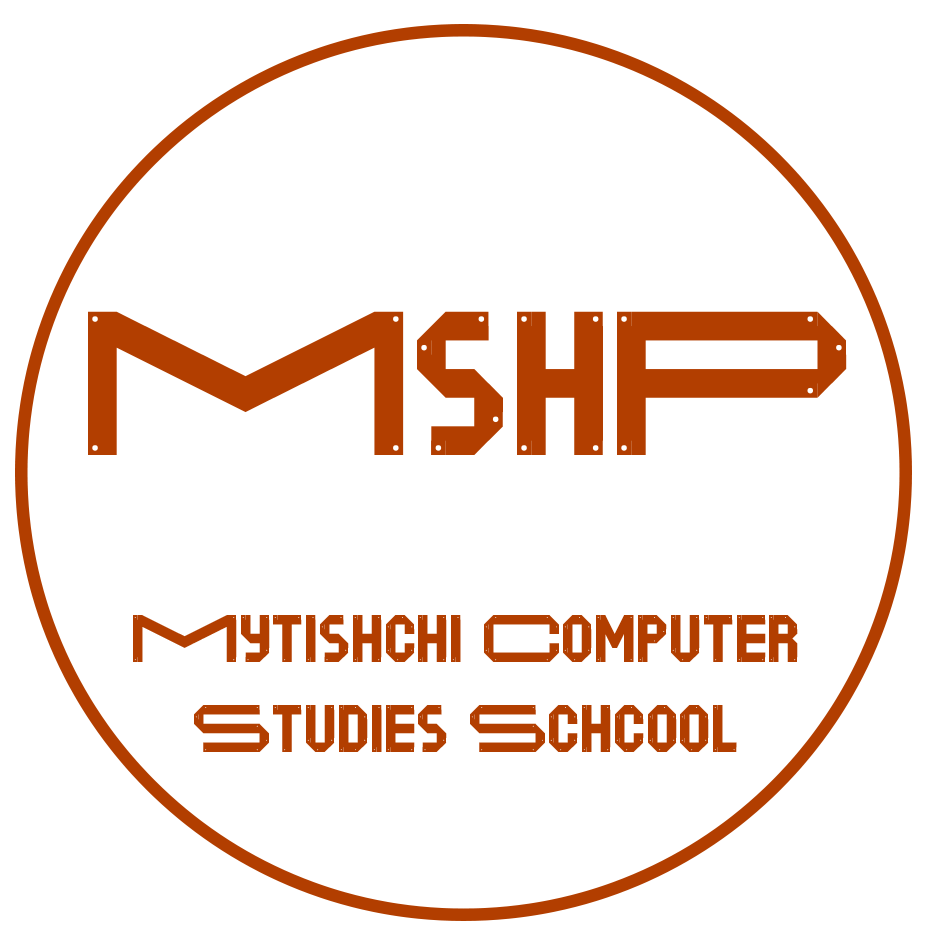
<style>
.page{position:relative;width:945px;height:945px;background:#ffffff}
.page>*{position:absolute;margin:0}
.t1{font:229.2px "Motorless-Drilled";color:#b23e00}
.t2{font:75px "Motorless-Hammered";color:#b23e00}
</style>
<div class="page">
<p class="t1" style="left:88px;top:311px;width:759px;height:144px">MshP</p>
<p class="t2" style="left:133px;top:615px;width:665px;height:137px;text-align:center">Mytishchi Computer Studies Schcool</p>
</div>
